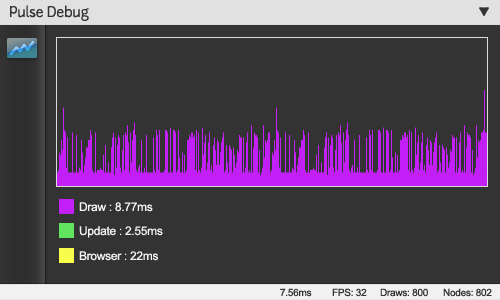
<style>
.page{position:relative;width:500px;height:300px;background:#333333}
.page>*{position:absolute;margin:0}
.t1{font:14px "Junction";letter-spacing:-0.025em;color:#333333}
.t2{font:12px "ArialMT";letter-spacing:-0.025em;color:#f6f6f6}
.t3{font:12px "ArialMT";letter-spacing:-0.025em;color:#f5f5f5}
.t4{font:10px "ArialMT";letter-spacing:-0.025em;color:#333333}
</style>
<div class="page">
<p class="t1" style="left:10px;top:5px;width:79px;height:16px">Pulse Debug</p>
<p class="t2" style="left:79px;top:202px;width:74px;height:10px">Draw : 8.77ms</p>
<p class="t3" style="left:79px;top:226px;width:84px;height:12px">Update : 2.55ms</p>
<p class="t3" style="left:79px;top:251px;width:79px;height:10px">Browser : 22ms</p>
<p class="t4" style="left:280px;top:288px;width:32px;height:9px">7.56ms</p>
<p class="t4" style="left:332px;top:288px;width:35px;height:9px">FPS: 32</p>
<p class="t4" style="left:380px;top:288px;width:48px;height:9px">Draws: 800</p>
<p class="t4" style="left:443px;top:288px;width:49px;height:9px">Nodes: 802</p>
</div>
